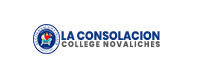
<style>
.page{position:relative;width:202px;height:80px;background:#ffffff}
.page>*{position:absolute;margin:0}
.t1{font:12.4px "Poppins-ExtraBold";color:#0e3886;text-transform:uppercase;scale:0.89 1}
.t2{font:8.2px "Poppins-ExtraBold";letter-spacing:0.14em;color:#595959;text-transform:uppercase;scale:0.89 1}
</style>
<div class="page">
<p class="t1" style="left:61px;top:31px;width:99px;height:9px">la consolacion</p>
<p class="t2" style="left:61px;top:41px;width:99px;height:7px">college novaliches</p>
</div>
